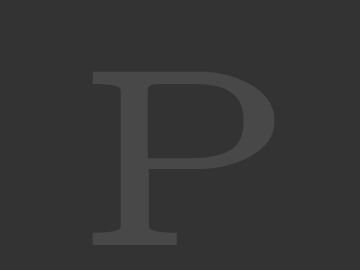
<style>
.page{position:relative;width:360px;height:270px;background:#333333}
.page>*{position:absolute;margin:0}
.t1{font:253.8px "Cmr5";color:#484848;text-transform:uppercase}
</style>
<div class="page">
<p class="t1" style="left:92px;top:71px;width:183px;height:174px">P</p>
</div>
